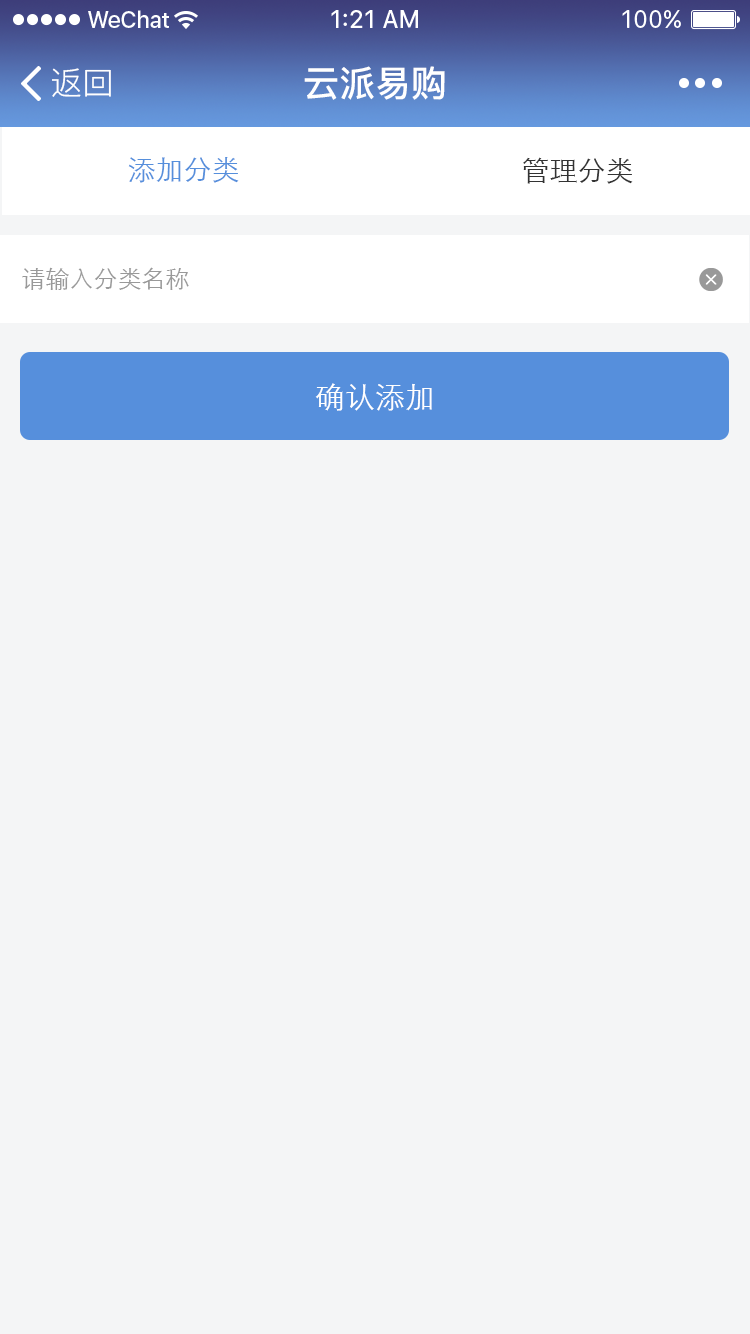
<style>
.page{position:relative;width:750px;height:1334px;background:#f4f5f6}
.page>*{position:absolute;margin:0}
.t1{font:32px "PingFang-SC-Regular";color:#ffffff}
.t2{font:36px "PingFang-SC-Bold";color:#ffffff}
.t3{font:28px "STXihei";color:#568fdc}
.t4{font:28px "STXihei";color:#333333}
.t5{font:24px "STXihei";color:#999999}
.t6{font:30px "STXihei";color:#ffffff}
</style>
<div class="page">
<p class="t1" style="left:52px;top:68px;width:59px;height:29px">返回</p>
<p class="t2" style="left:304px;top:66px;width:141px;height:34px">云派易购</p>
<p class="t3" style="left:128px;top:157px;width:111px;height:26px">添加分类</p>
<p class="t4" style="left:523px;top:157px;width:110px;height:27px">管理分类</p>
<p class="t5" style="left:22px;top:267px;width:167px;height:23px">请输入分类名称</p>
<p class="t6" style="left:315px;top:383px;width:117px;height:28px">确认添加</p>
</div>
